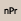
<style>
.page{position:relative;width:21px;height:21px;background:#d9cdc1}
.page>*{position:absolute;margin:0}
.t1{font:9px "Tahoma";color:#000000}
</style>
<div class="page">
<p class="t1" style="left:4px;top:7px;width:14px;height:7px">nPr</p>
</div>
